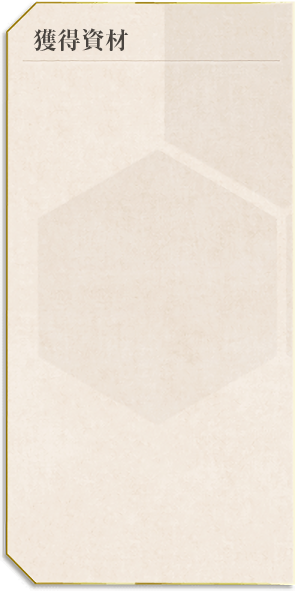
<style>
.page{position:relative;width:295px;height:591px}
.page>*{position:absolute;margin:0}
.t1{font:24px "RyuminPr6N-ExBold";color:#4a4540}
</style>
<div class="page">
<p class="t1" style="left:33px;top:28px;width:96px;height:23px">獲得資材</p>
</div>
